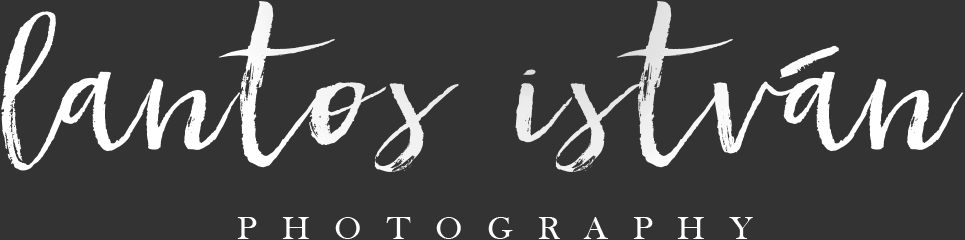
<style>
.page{position:relative;width:965px;height:240px;background:#333333}
.page>*{position:absolute;margin:0}
.t1{font:192px "Halfback-Regular";letter-spacing:0.025em;color:#ffffff;scale:1.05 1}
.t2{font:33px/100px "BaskOldFace";letter-spacing:0.73em;color:#ffffff;text-transform:uppercase;scale:1.03 1}
</style>
<div class="page">
<p class="t1" style="left:0px;top:1px;width:964px;height:238px;text-align:center">lantos istván<br><span class="t2">photography</span></p>
</div>
